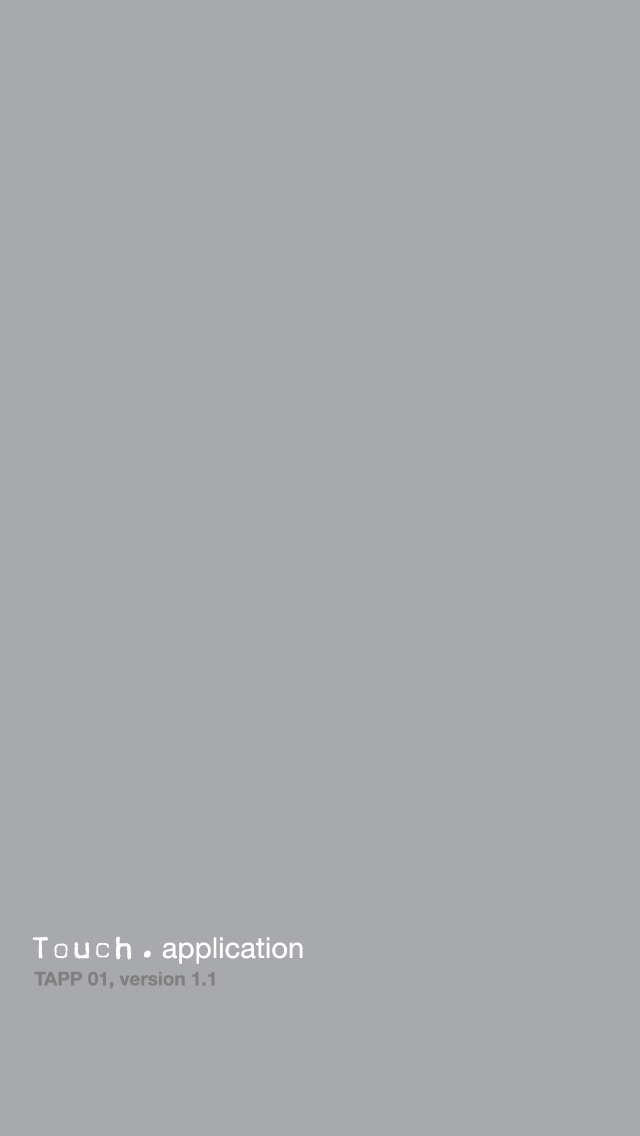
<style>
.page{position:relative;width:640px;height:1136px;background:#a7a9ac}
.page>*{position:absolute;margin:0}
.t1{font:29px "HelveticaNeue-Roman";color:#ffffff}
.t2{font:34px "Magda-Plain";letter-spacing:0.06em;color:#ffffff}
.t3{font:34px "Magda-Light";letter-spacing:0.06em;color:#ffffff}
.t4{font:34px "Magda-Plain";letter-spacing:0.2em;color:#ffffff}
.t5{font:28px "Magda-Plain";letter-spacing:0.25em;color:#ffffff}
.t6{font:19px "HelveticaNeue-Bold";color:#808080}
</style>
<div class="page">
<p class="t1" style="left:32px;top:936px;width:271px;height:28px"><span class="t2">T</span><span class="t3">o</span><span class="t2">u</span><span class="t3">c</span><span class="t4">h</span><span class="t5">.</span>application</p>
<p class="t6" style="left:34px;top:971px;width:181px;height:18px">TAPP 01, version 1.1</p>
</div>
